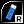
<style>
.page{position:relative;width:24px;height:24px;background:#000000}
.page>*{position:absolute;margin:0}
.t1{font:7.9px "Montserrat-Bold";color:#000000}
</style>
<div class="page">
<p class="t1" style="left:16px;top:16px;width:6px;height:6px">R</p>
</div>
